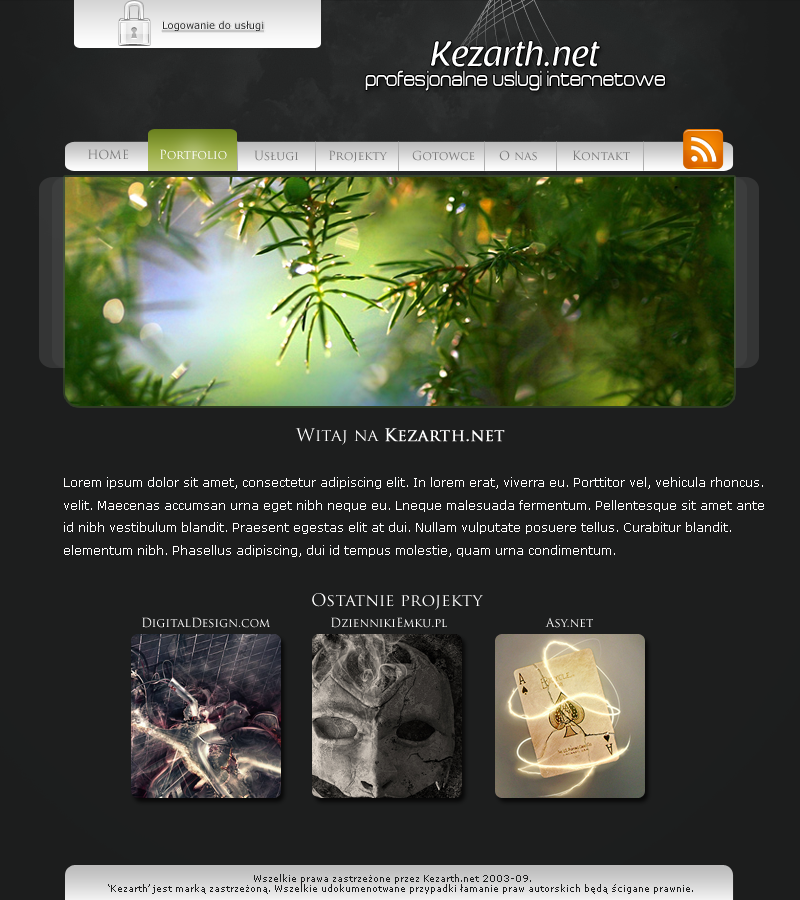
<style>
.page{position:relative;width:800px;height:900px;background:#1d1e1e}
.page>*{position:absolute;margin:0}
.t1{font:10px "Verdana";color:#2a2b2b;text-decoration:underline}
.t2{font:35px "RaspoutineClassic";color:#ffffff}
.t3{font:20px "Acens";color:#ffffff}
.t4{font:12px "TrajanPro-Regular";color:#7b7b7b}
.t5{font:12px "TrajanPro-Regular";color:#ffffff}
.t6{font:17px "TrajanPro-Regular";color:#ffffff;font-weight:bold}
.t7{font:17px "TrajanPro-Regular";color:#ffffff}
.t8{font:12px/22.5px "Verdana";color:#ffffff}
.t9{font:9px "Verdana";color:#1d1e1e}
</style>
<div class="page">
<p class="t1" style="left:162px;top:21px;width:103px;height:11px">Logowanie do usługi</p>
<p class="t2" style="left:431px;top:41px;width:169px;height:26px">Kezarth.net</p>
<p class="t3" style="left:365px;top:70px;width:300px;height:21px">profesjonalne uslugi internetowe</p>
<p class="t4" style="left:88px;top:149px;width:41px;height:11px">HOME</p>
<p class="t5" style="left:160px;top:149px;width:67px;height:11px">Portfolio</p>
<p class="t4" style="left:254px;top:150px;width:44px;height:11px">Usługi</p>
<p class="t4" style="left:329px;top:150px;width:59px;height:13px">Projekty</p>
<p class="t4" style="left:412px;top:150px;width:63px;height:11px">Gotowce</p>
<p class="t4" style="left:499px;top:150px;width:38px;height:11px">O nas</p>
<p class="t4" style="left:573px;top:150px;width:57px;height:11px">Kontakt</p>
<p class="t6" style="left:295px;top:428px;width:210px;height:17px"><span class="t7">Witaj na </span>Kezarth.net</p>
<p class="t8" style="left:64px;top:477px;width:700px;height:80px">Lorem ipsum dolor sit amet, consectetur adipiscing elit. In lorem erat, viverra eu. Porttitor vel, vehicula rhoncus.<br>velit. Maecenas accumsan urna eget nibh neque eu. Lneque malesuada fermentum. Pellentesque sit amet ante<br>id nibh vestibulum blandit. Praesent egestas elit at dui. Nullam vulputate posuere tellus. Curabitur blandit.<br>elementum nibh. Phasellus adipiscing, dui id tempus molestie, quam urna condimentum.</p>
<p class="t7" style="left:312px;top:593px;width:171px;height:17px">Ostatnie projekty</p>
<p class="t5" style="left:142px;top:617px;width:128px;height:11px">DigitalDesign.com</p>
<p class="t5" style="left:331px;top:617px;width:116px;height:11px">DziennikiEmku.pl</p>
<p class="t5" style="left:545px;top:617px;width:48px;height:11px">Asy.net</p>
<p class="t9" style="left:254px;top:874px;width:277px;height:10px">Wszelkie prawa zastrzeżone przez Kezarth.net 2003-09.</p>
<p class="t9" style="left:108px;top:884px;width:585px;height:10px">‘Kezarth’ jest marką zastrzeżoną. Wszelkie udokumenotwane przypadki łamanie praw autorskich będą ścigane prawnie.</p>
</div>
